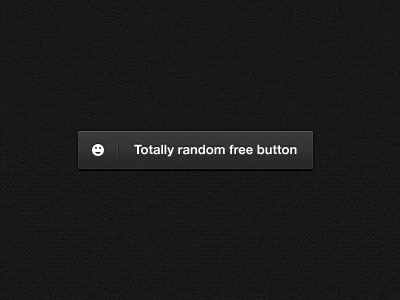
<style>
.page{position:relative;width:400px;height:300px}
.page>*{position:absolute;margin:0}
.t1{font:13px "HelveticaNeue-Bold";color:#ffffff}
</style>
<div class="page">
<p class="t1" style="left:134px;top:144px;width:163px;height:13px">Totally random free button</p>
</div>
